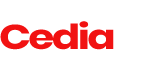
<style>
.page{position:relative;width:150px;height:72px;background:#ffffff}
.page>*{position:absolute;margin:0}
.t1{font:34.4px "Poppins-Bold";letter-spacing:-0.06em;color:#f11212;scale:1.22 1}
</style>
<div class="page">
<p class="t1" style="left:0px;top:21px;width:114px;height:29px">Cedia</p>
</div>
